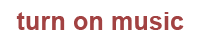
<style>
.page{position:relative;width:200px;height:45px;background:#ffffff}
.page>*{position:absolute;margin:0}
.t1{font:25px "Arial-BoldMT";color:#a24242}
</style>
<div class="page">
<p class="t1" style="left:16px;top:12px;width:168px;height:18px">turn on music</p>
</div>
